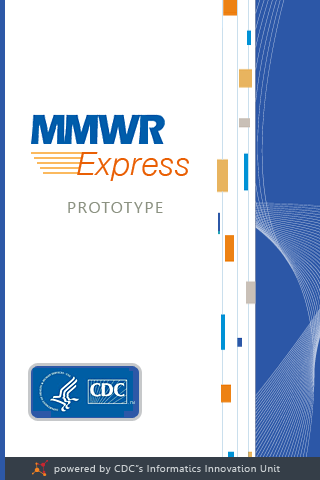
<style>
.page{position:relative;width:320px;height:480px;background:#ffffff}
.page>*{position:absolute;margin:0}
.t1{font:32px "HelveticaNeue-LightItalic";letter-spacing:0.025em;color:#e95f04}
.t2{font:16px "Gisha";letter-spacing:0.1em;color:#8c9282}
.t3{font:4px "MyriadPro-Regular";color:#68a1c5}
.t4{font:10px "Gisha";letter-spacing:0.05em;color:#caced1}
</style>
<div class="page">
<p class="t1" style="left:77px;top:152px;width:112px;height:29px">Express</p>
<p class="t2" style="left:68px;top:202px;width:95px;height:11px">PROTOTYPE</p>
<p class="t3" style="left:130px;top:401px;width:5px;height:3px">TM</p>
<p class="t4" style="left:54px;top:465px;width:226px;height:9px">powered by CDC”s Informatics Innovation Unit</p>
</div>
